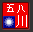
<style>
.page{position:relative;width:33px;height:32px;background:#f20000}
.page>*{position:absolute;margin:0}
.t1{font:10.4px "SimSun";color:#ffffff}
.t2{font:11.7px "SimSun";color:#ffffff}
</style>
<div class="page">
<p class="t1" style="left:7px;top:4px;width:18px;height:9px">五八</p>
<p class="t2" style="left:16px;top:15px;width:11px;height:12px">川</p>
</div>
